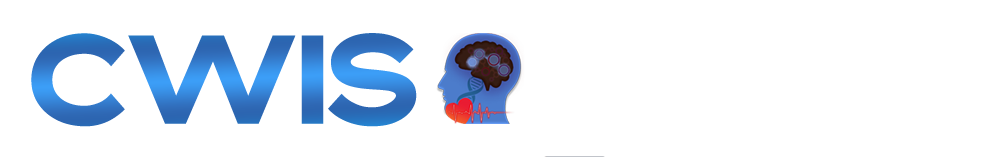
<style>
.page{position:relative;width:1000px;height:160px;background:#ffffff}
.page>*{position:absolute;margin:0}
.t1{font:111.1px "Bristone";letter-spacing:-0.04em}
</style>
<div class="page">
<p class="t1" style="left:31px;top:33px;width:386px;height:94px">cwis</p>
</div>
